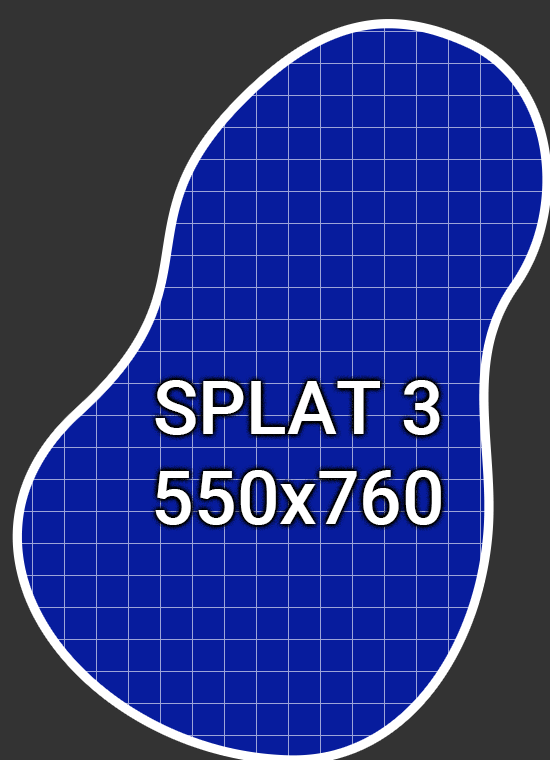
<style>
.page{position:relative;width:550px;height:760px;background:#071c9d}
.page>*{position:absolute;margin:0}
.t1{font:75px "Roboto-Medium";color:#ffffff}
</style>
<div class="page">
<p class="t1" style="left:155px;top:380px;width:286px;height:145px;text-align:center">SPLAT 3<br>550x760</p>
</div>
